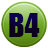
<style>
.page{position:relative;width:48px;height:48px;background:#ffffff}
.page>*{position:absolute;margin:0}
.t1{font:30px "Impact"}
</style>
<div class="page">
<p class="t1" style="left:9px;top:13px;width:31px;height:24px">B4</p>
</div>
